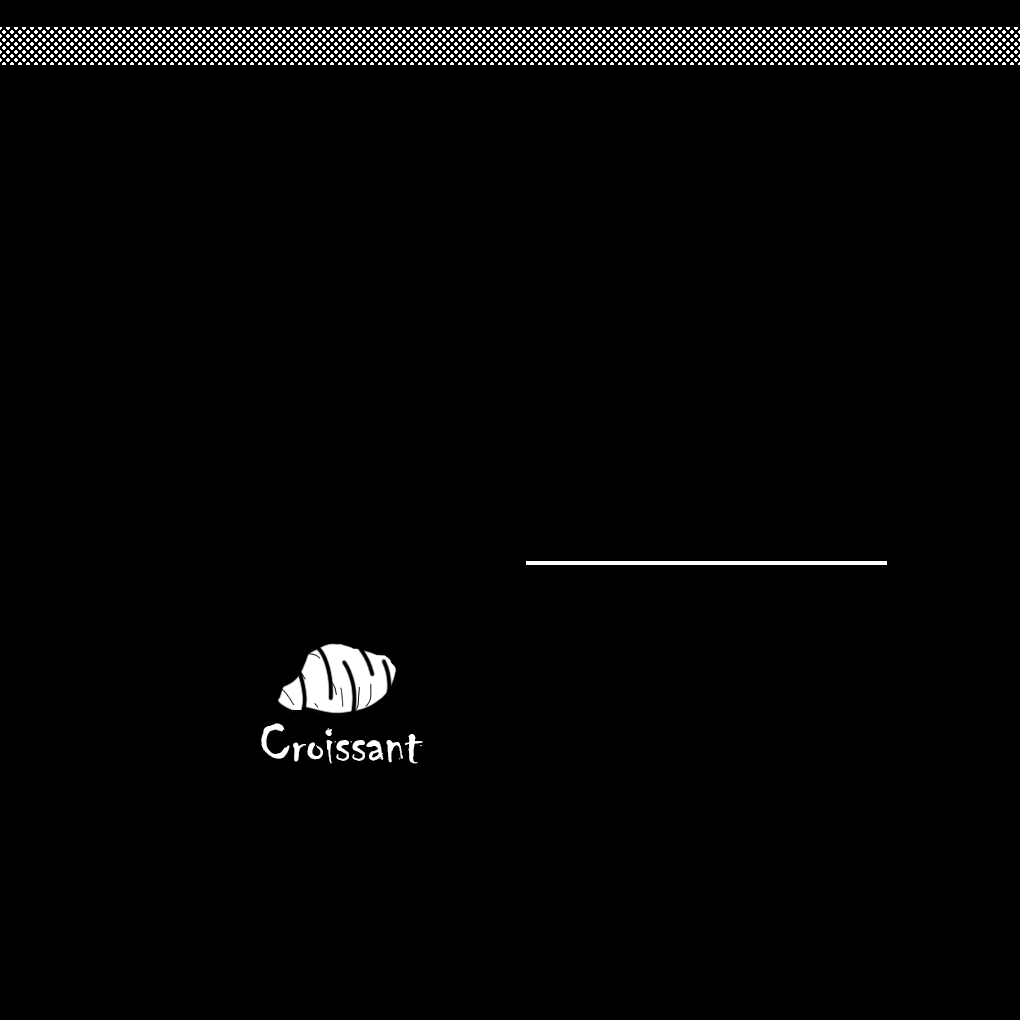
<style>
.page{position:relative;width:1020px;height:1020px;background:#000000}
.page>*{position:absolute;margin:0}
.t1{font:60px "Chiller-Regular";color:#ffffff}
</style>
<div class="page">
<p class="t1" style="left:261px;top:723px;width:162px;height:41px">Croissant</p>
</div>
